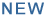
<style>
.page{position:relative;width:47px;height:15px;background:#ffffff}
.page>*{position:absolute;margin:0}
.t1{font:16px "ArialMT";letter-spacing:0.111em;color:#336699;font-weight:bold}
</style>
<div class="page">
<p class="t1" style="left:2px;top:2px;width:42px;height:13px">NEW</p>
</div>
